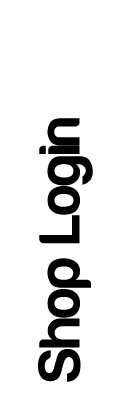
<style>
.page{position:relative;width:120px;height:400px;background:#ffffff}
.page>*{position:absolute;margin:0}
.t1{font:60px "Harabara-Bold";color:#000000}
</style>
<div class="page">
<p class="t1" style="left:38px;top:118px;width:55px;height:264px;rotate:-90deg">Shop Login</p>
</div>
